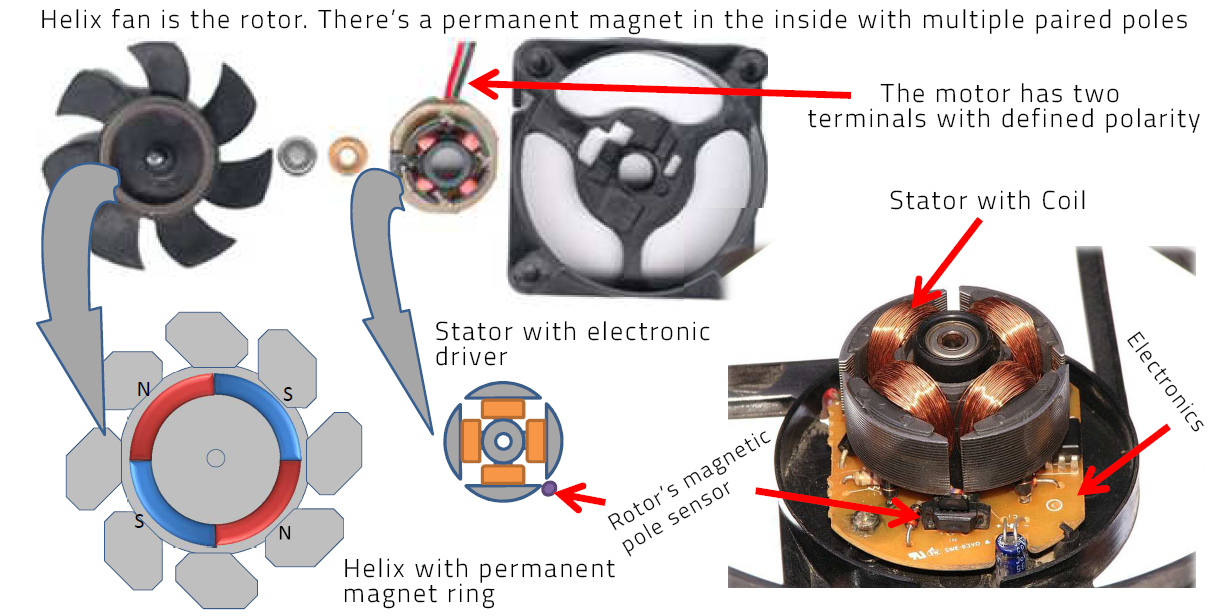
<style>
.page{position:relative;width:1214px;height:616px;background:#ffffff}
.page>*{position:absolute;margin:0}
.t1{font:26px "TitilliumWeb-Light";letter-spacing:0.08em;color:#000000}
.t2{font:26px/25px "TitilliumWeb-Light";letter-spacing:0.08em;color:#000000}
.t3{font:22px "TitilliumWeb-Light";letter-spacing:0.08em;color:#000000}
.t4{font:22px/25px "TitilliumWeb-Light";letter-spacing:0.08em;color:#000000}
</style>
<div class="page">
<p class="t1" style="left:42px;top:8px;width:1145px;height:27px">Helix fan is the rotor. There’s a permanent magnet in the inside with multiple paired poles</p>
<p class="t2" style="left:808px;top:83px;width:392px;height:50px;text-align:center">The motor has two <br>terminals with defined polarity</p>
<p class="t1" style="left:890px;top:190px;width:195px;height:20px">Stator with Coil</p>
<p class="t2" style="left:436px;top:321px;width:274px;height:45px">Stator with electronic<br>driver</p>
<p class="t3" style="left:1127px;top:331px;width:77px;height:101px;rotate:53deg">Electronics</p>
<p class="t4" style="left:607px;top:431px;width:164px;height:126px;rotate:-30deg">Rotor’s magnetic<br>pole sensor</p>
<p class="t2" style="left:344px;top:558px;width:271px;height:51px">Helix with permanent<br>magnet ring</p>
</div>
